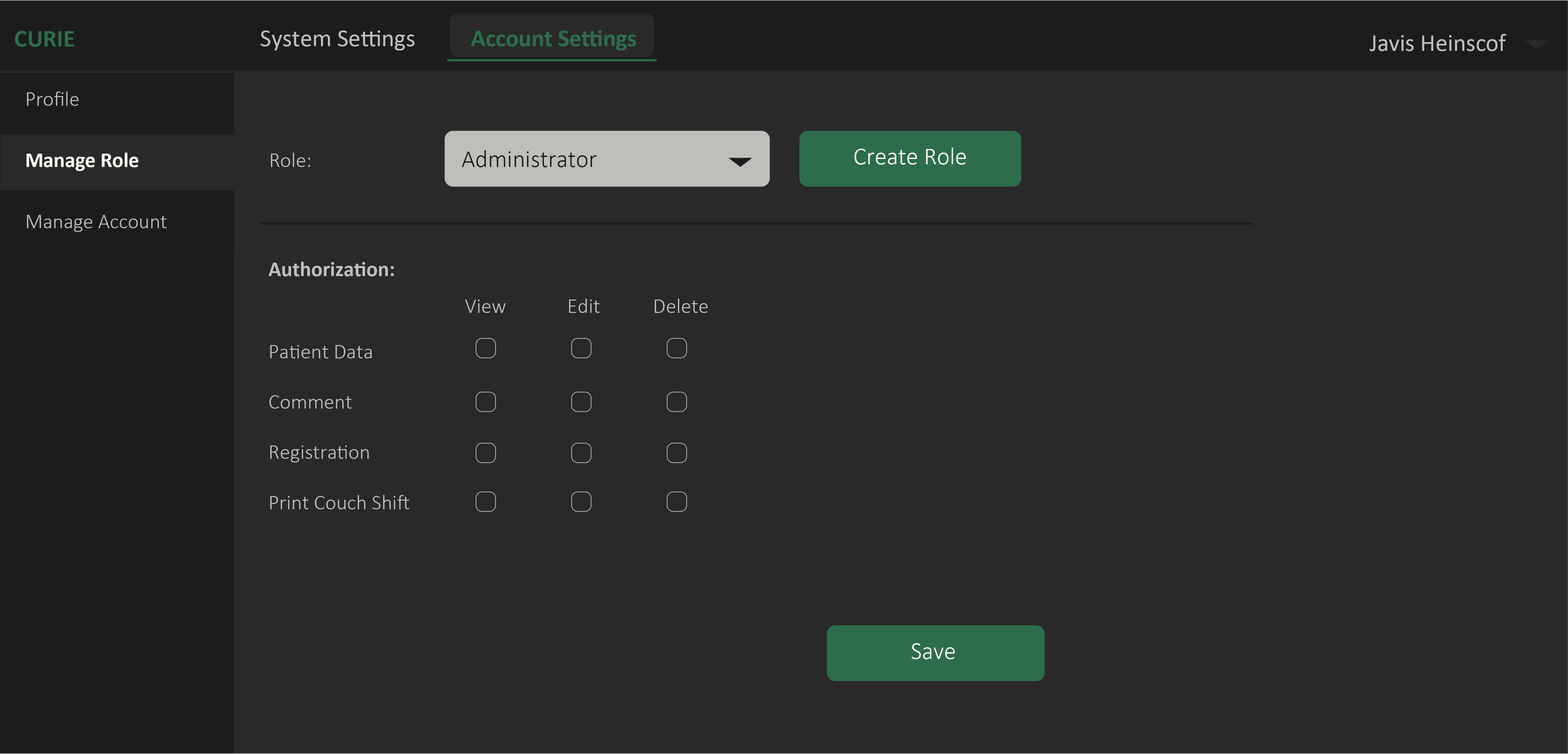
<style>
.page{position:relative;width:1568px;height:754px;background:#292929}
.page>*{position:absolute;margin:0}
.t1{font:24.4px "Calibri-Bold";color:#2d6d4b}
.t2{font:24.4px "Calibri";color:#bdc0ba}
.t3{font:24.4px "Calibri-Bold";letter-spacing:-0.008em;color:#2d6d4b}
.t4{font:24.4px "Calibri";letter-spacing:-0.016em;color:#bdc0ba}
.t5{font:24.4px "Calibri";letter-spacing:-0.007em;color:#bdc0ba}
.t6{font:20.9px "Calibri-Light";color:#bdc0ba}
.t7{font:24.4px "Calibri-Light";color:#fcfaf2}
.t8{font:20.9px "Calibri-Bold";color:#fcfaf2}
.t9{font:20.9px "Calibri-Light";letter-spacing:0.004em;color:#bdc0ba}
.t10{font:24.4px "Calibri-Light";color:#1c1c1c}
.t11{font:20.9px "Calibri-Bold";letter-spacing:0.004em;color:#bdc0ba}
</style>
<div class="page">
<p class="t1" style="left:15px;top:31px;width:59px;height:16px">CURIE</p>
<p class="t2" style="left:261px;top:30px;width:154px;height:21px">System Settings</p>
<p class="t3" style="left:471px;top:30px;width:165px;height:21px">Account Settings</p>
<p class="t2" style="left:1370px;top:34px;width:136px;height:17px">J<span class="t4">a</span>vis Heins<span class="t5">c</span>of</p>
<p class="t6" style="left:27px;top:91px;width:52px;height:15px">Profile</p>
<p class="t7" style="left:854px;top:148px;width:112px;height:17px">Create Role</p>
<p class="t8" style="left:26px;top:153px;width:113px;height:18px">Manage Role</p>
<p class="t9" style="left:271px;top:153px;width:39px;height:14px">Role:</p>
<p class="t10" style="left:462px;top:150px;width:135px;height:17px">Administrator</p>
<p class="t6" style="left:27px;top:215px;width:140px;height:17px">Manage Account</p>
<p class="t11" style="left:268px;top:262px;width:126px;height:14px">Authorization:</p>
<p class="t9" style="left:465px;top:299px;width:41px;height:14px">View</p>
<p class="t9" style="left:569px;top:298px;width:31px;height:15px">Edit</p>
<p class="t9" style="left:655px;top:298px;width:53px;height:15px">Delete</p>
<p class="t9" style="left:270px;top:345px;width:102px;height:13px">Patient Data</p>
<p class="t9" style="left:269px;top:395px;width:83px;height:14px">Comment</p>
<p class="t9" style="left:270px;top:445px;width:99px;height:17px">Registration</p>
<p class="t9" style="left:270px;top:495px;width:139px;height:14px">Print Couch Shift</p>
<p class="t7" style="left:911px;top:643px;width:44px;height:16px">Save</p>
</div>
